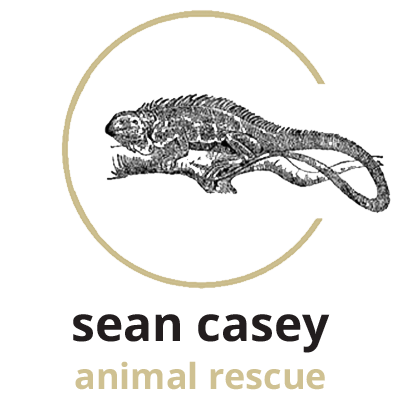
<style>
.page{position:relative;width:399px;height:402px;background:#ffffff}
.page>*{position:absolute;margin:0}
.t1{font:36px/48px "OpenSans-Bold";color:#cfc192}
.t2{font:48px/60px "OpenSans-Bold";color:#221d1e}
</style>
<div class="page">
<p class="t1" style="left:73px;top:314px;width:257px;height:76px;text-align:center"><span class="t2">sean casey<br></span>animal rescue</p>
</div>
